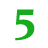
<style>
.page{position:relative;width:48px;height:48px;background:#ffffff}
.page>*{position:absolute;margin:0}
.t1{font:45px "Constantia-Bold";color:#16ac1d}
</style>
<div class="page">
<p class="t1" style="left:15px;top:9px;width:20px;height:32px">5</p>
</div>
